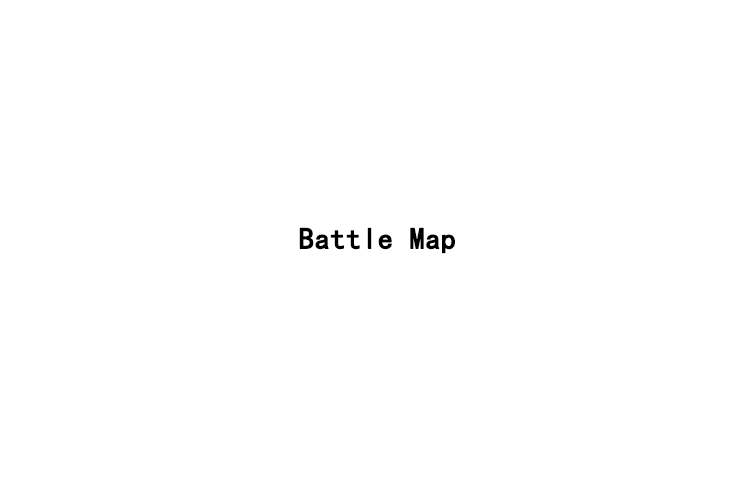
<style>
.page{position:relative;width:750px;height:500px;background:#ffffff}
.page>*{position:absolute;margin:0}
.t1{font:30px "SimHei";color:#000000;font-weight:bold}
</style>
<div class="page">
<p class="t1" style="left:299px;top:227px;width:156px;height:27px">Battle Map</p>
</div>
